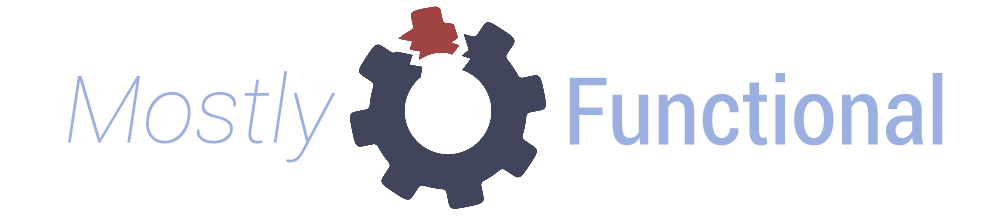
<style>
.page{position:relative;width:1000px;height:216px;background:#ffffff}
.page>*{position:absolute;margin:0}
.t1{font:93.3px "Roboto-ThinItalic";color:#9bb0e0}
.t2{font:93.3px "Roboto-Condensed";color:#9bb0e0}
</style>
<div class="page">
<p class="t1" style="left:68px;top:71px;width:268px;height:92px">Mostly</p>
<p class="t2" style="left:569px;top:73px;width:374px;height:73px">Functional</p>
</div>
